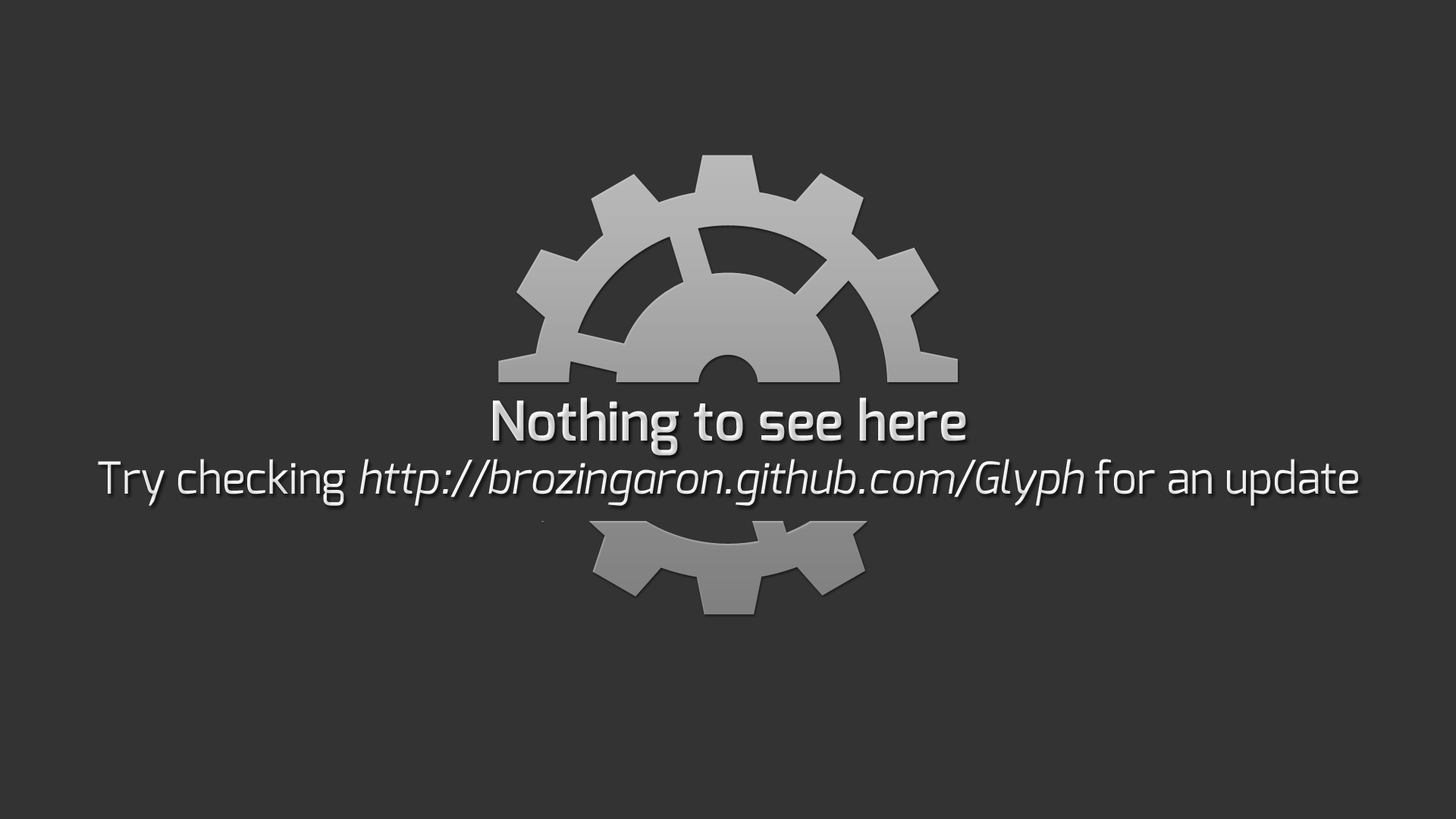
<style>
.page{position:relative;width:1456px;height:819px;background:#333333}
.page>*{position:absolute;margin:0}
.t1{font:44px "Exo-Italic";color:#eaeaea}
.t2{font:54.6px "Exo-DemiBold";color:#eaeaea}
.t3{font:44px "Exo-Regular";color:#eaeaea}
</style>
<div class="page">
<p class="t1" style="left:98px;top:397px;width:1261px;height:109px;text-align:center"><span class="t2">Nothing to see here<br></span><span class="t3">Try checking </span>http://brozingaron.github.com/Glyph<span class="t3"> for an update</span></p>
</div>
